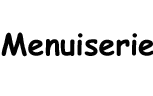
<style>
.page{position:relative;width:153px;height:96px;background:#ffffff}
.page>*{position:absolute;margin:0}
.t1{font:30px "ComicSansMS-Bold";color:#020202}
</style>
<div class="page">
<p class="t1" style="left:1px;top:32px;width:153px;height:25px">Menuiserie</p>
</div>
